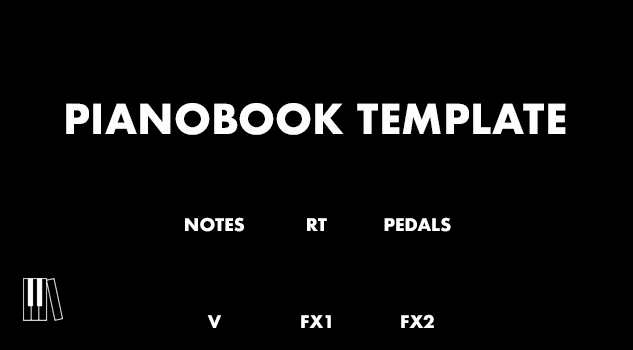
<style>
.page{position:relative;width:633px;height:350px;background:#000000}
.page>*{position:absolute;margin:0}
.t1{font:40px "Futura-Bold";color:#fefdfd;text-transform:uppercase}
.t2{font:17px "Futura-Bold";color:#fffefe;text-transform:uppercase}
</style>
<div class="page">
<p class="t1" style="left:66px;top:103px;width:500px;height:32px">Pianobook Template</p>
<p class="t2" style="left:185px;top:217px;width:59px;height:15px">NOTES</p>
<p class="t2" style="left:307px;top:218px;width:20px;height:13px">RT</p>
<p class="t2" style="left:384px;top:217px;width:67px;height:15px">PEDALS</p>
<p class="t2" style="left:207px;top:315px;width:14px;height:13px">V</p>
<p class="t2" style="left:301px;top:315px;width:30px;height:13px">FX1</p>
<p class="t2" style="left:401px;top:314px;width:33px;height:14px">FX2</p>
</div>
